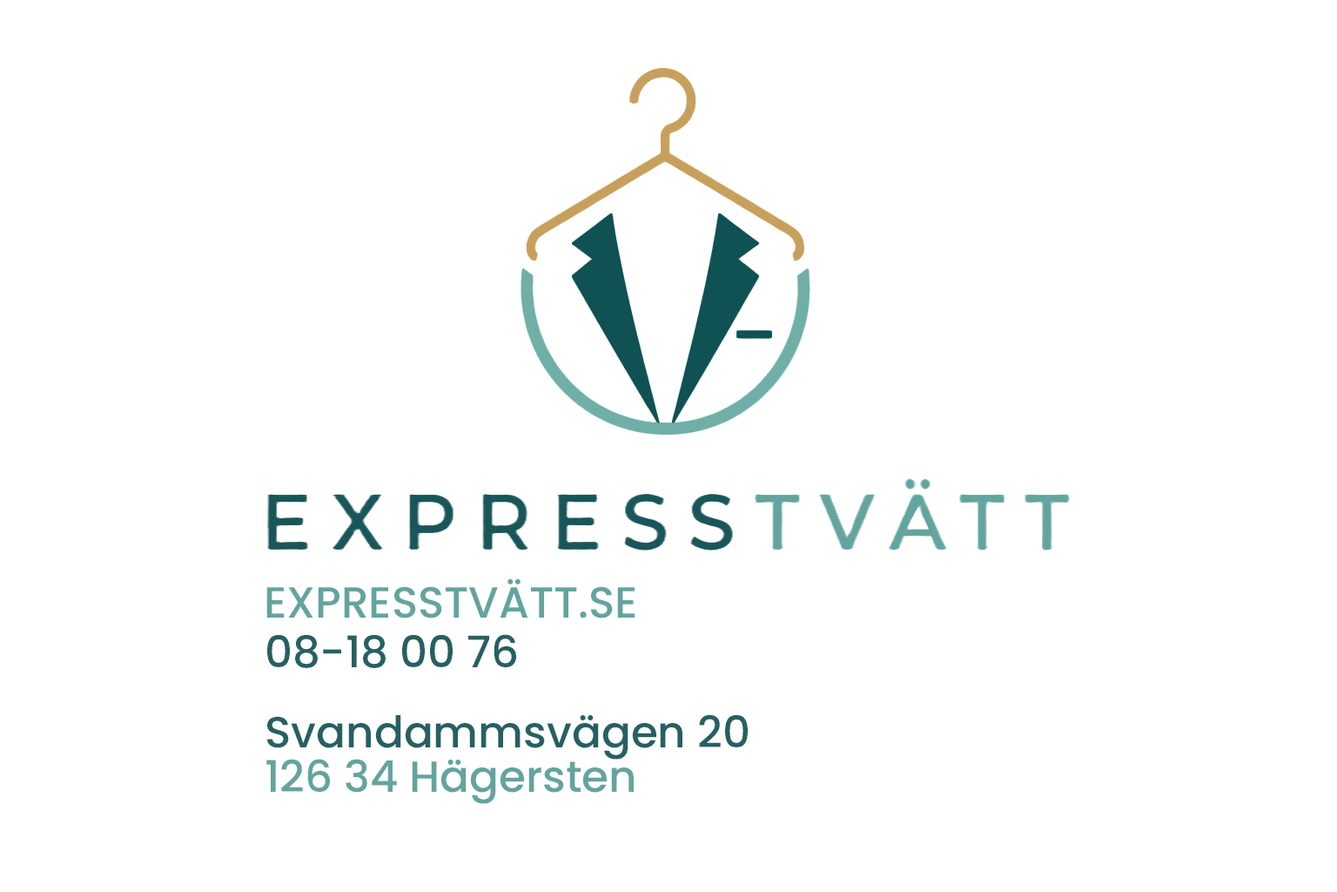
<style>
.page{position:relative;width:1337px;height:892px;background:#ffffff}
.page>*{position:absolute;margin:0}
.t1{font:43.5px "Poppins-Medium";color:#64a49e}
.t2{font:43.5px "Poppins-Medium";color:#266063}
</style>
<div class="page">
<p class="t1" style="left:266px;top:578px;width:369px;height:40px">EXPRESSTVÄTT.SE</p>
<p class="t2" style="left:267px;top:634px;width:249px;height:34px">08-18 00 76</p>
<p class="t2" style="left:267px;top:714px;width:481px;height:45px">Svandammsvägen 20</p>
<p class="t1" style="left:266px;top:758px;width:368px;height:46px">126 34 Hägersten</p>
</div>
